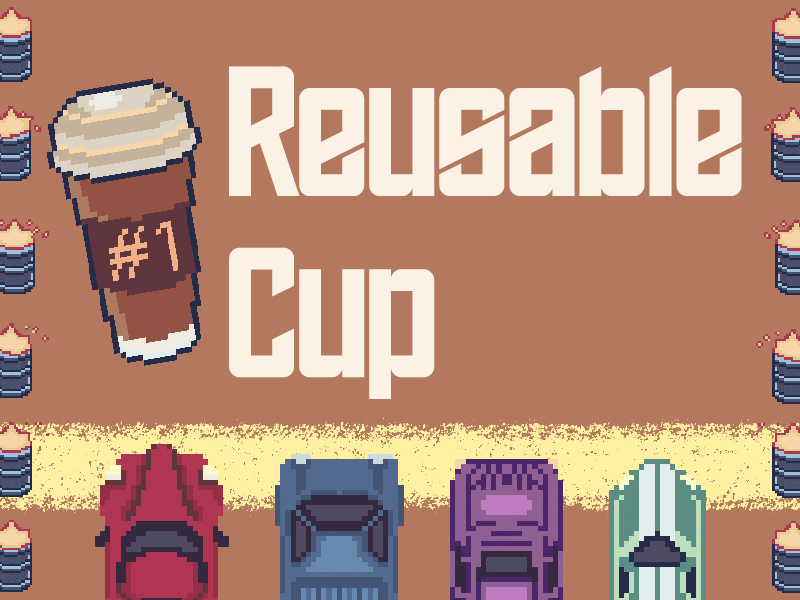
<style>
.page{position:relative;width:800px;height:600px;background:#b3785d}
.page>*{position:absolute;margin:0}
.t1{font:151px "Edge-of-the-Galaxy";color:#fbf1e5}
</style>
<div class="page">
<p class="t1" style="left:229px;top:66px;width:513px;height:333px">Reusable <br>Cup</p>
</div>
